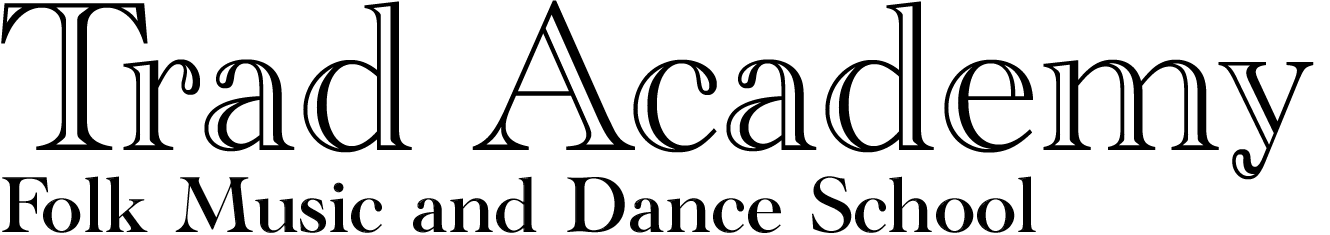
<style>
.page{position:relative;width:1330px;height:235px;background:#ffffff}
.page>*{position:absolute;margin:0}
.t1{font:220px "AcademyEngravedLetPlain";color:#000000}
.t2{font:82px "AcademyEngravedLetPlain";color:#000000}
</style>
<div class="page">
<p class="t1" style="left:1px;top:0px;width:1313px;height:180px">Trad Academy</p>
<p class="t2" style="left:2px;top:176px;width:1034px;height:57px">Folk Music and Dance School</p>
</div>
